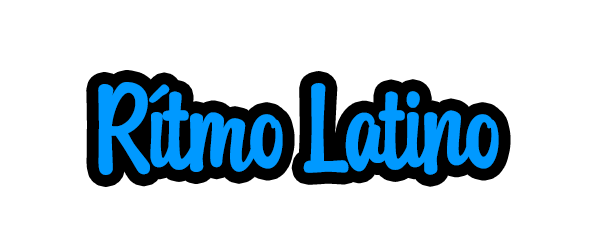
<style>
.page{position:relative;width:600px;height:250px;background:#ffffff}
.page>*{position:absolute;margin:0}
.t1{font:129.2px "MangoDrink-Regular";color:#0099ff}
</style>
<div class="page">
<p class="t1" style="left:98px;top:82px;width:401px;height:93px">Rítmo Latino</p>
</div>
